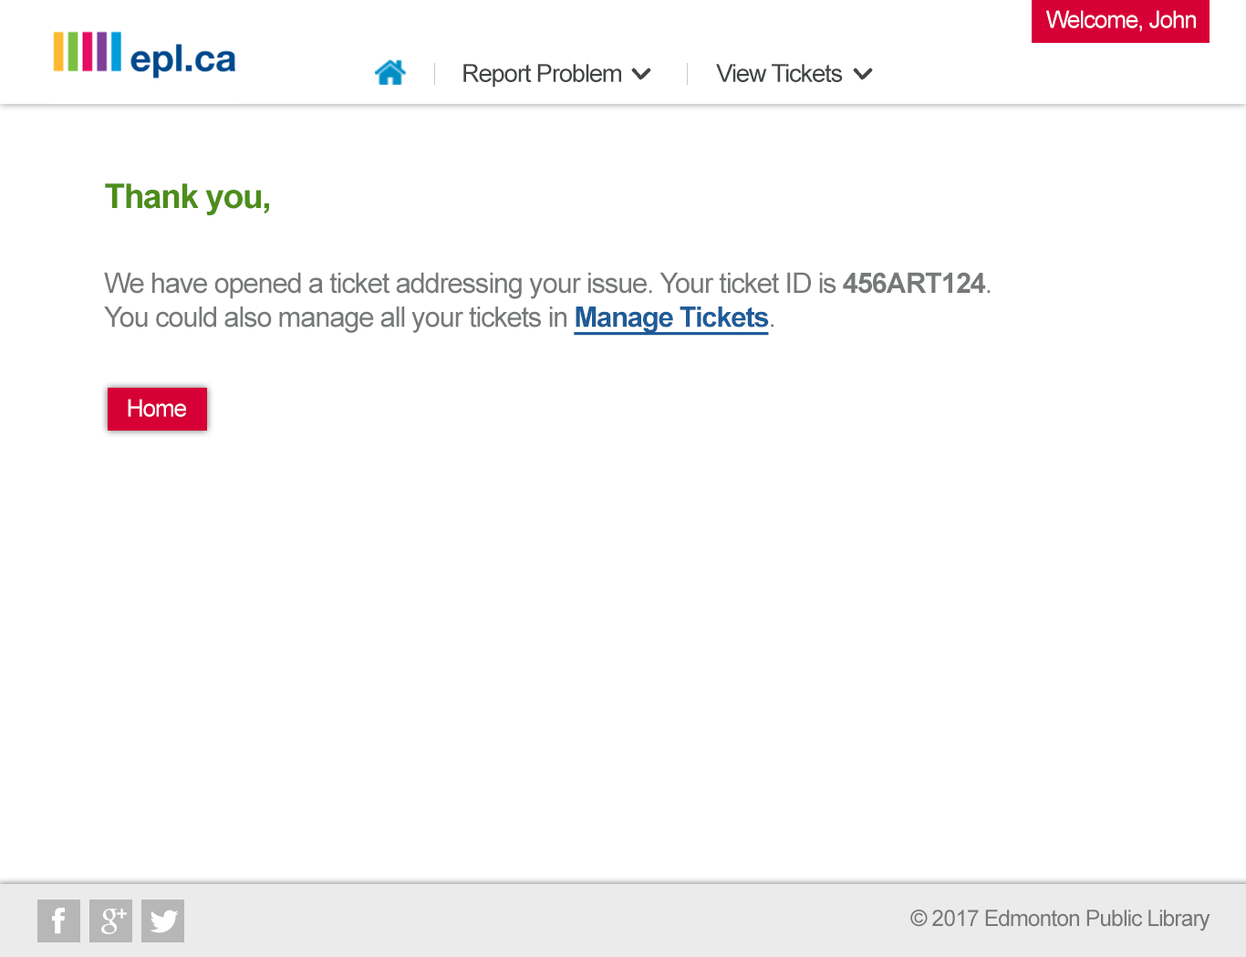
<style>
.page{position:relative;width:1246px;height:957px;background:#ffffff}
.page>*{position:absolute;margin:0}
.t1{font:23.7px "ArialMT";letter-spacing:-0.04em;color:#ffffff}
.t2{font:24.9px "ArialMT";letter-spacing:-0.04em;color:#414546}
.t3{font:33.9px "Arial-BoldMT";letter-spacing:-0.04em;color:#4d8d1a}
.t4{font:28.3px "ArialMT";letter-spacing:-0.04em;color:#767979}
.t5{font:28.3px "Arial-BoldMT";letter-spacing:-0.04em;color:#767979}
.t6{font:28.3px "Arial-BoldMT";letter-spacing:-0.04em;color:#1f5c98;text-decoration:underline}
.t7{font:22.6px "ArialMT";letter-spacing:-0.04em;color:#767979}
</style>
<div class="page">
<p class="t1" style="left:1046px;top:10px;width:150px;height:22px">Welcome, John</p>
<p class="t2" style="left:463px;top:64px;width:158px;height:24px">Report Problem</p>
<p class="t2" style="left:716px;top:64px;width:127px;height:18px">View Tickets</p>
<p class="t3" style="left:105px;top:183px;width:164px;height:32px">Thank you,</p>
<p class="t4" style="left:104px;top:272px;width:887px;height:64px">We have opened a ticket addressing your issue. Your ticket ID is <span class="t5">456ART124</span>.<br>You could also manage all your tickets in <span class="t6">Manage Tickets</span>.</p>
<p class="t1" style="left:128px;top:399px;width:58px;height:18px">Home</p>
<p class="t7" style="left:910px;top:909px;width:301px;height:22px">© 2017 Edmonton Public Library</p>
</div>
